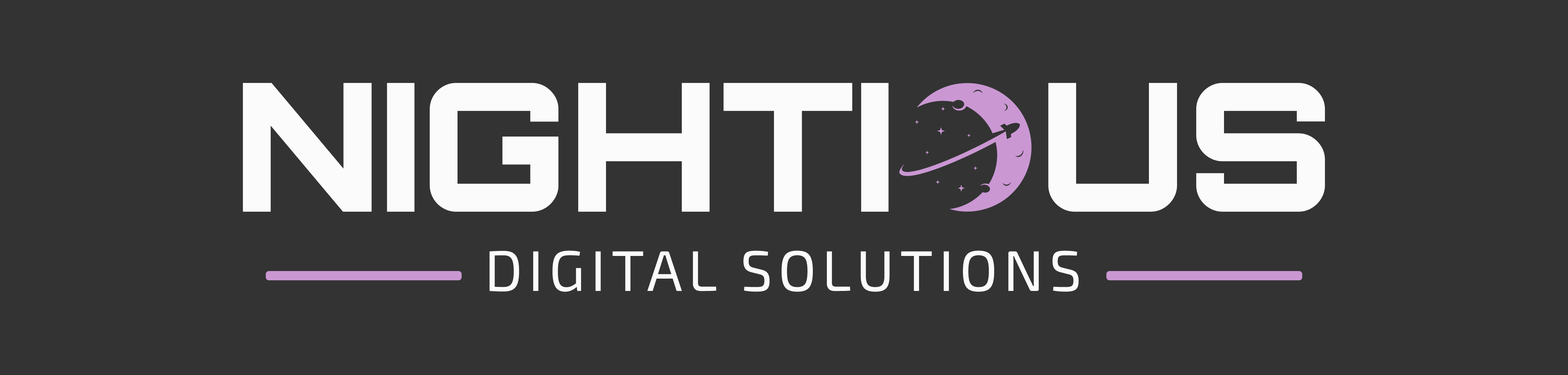
<style>
.page{position:relative;width:1568px;height:375px;background:#333333}
.page>*{position:absolute;margin:0}
.t1{font:178.6px "Orbitron-Black";color:#fbfbfb}
.t2{font:178.6px "MyriadPro-Regular";color:#fbfbfb}
.t3{font:57.2px "Exo2-Regular";letter-spacing:0.1em;color:#fbfbfb}
</style>
<div class="page">
<p class="t1" style="left:243px;top:83px;width:1082px;height:129px">NIGHTI<span class="t2">‎ ‎</span>  US</p>
<p class="t3" style="left:489px;top:250px;width:590px;height:42px">DIGITAL SOLUTIONS</p>
</div>
